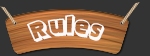
<style>
.page{position:relative;width:150px;height:56px;background:#333333}
.page>*{position:absolute;margin:0}
.t1{font:24px "PakenhamBoss";color:#fdf9f9;scale:0.71 1}
</style>
<div class="page">
<p class="t1" style="left:27px;top:14px;width:78px;height:28px">Rules</p>
</div>
